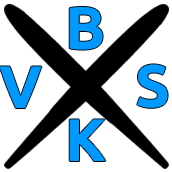
<style>
.page{position:relative;width:172px;height:172px;background:#ffffff}
.page>*{position:absolute;margin:0}
.t1{font:60px "Ubuntu-Bold";color:#0099ff;font-variant:small-caps}
</style>
<div class="page">
<p class="t1" style="left:69px;top:7px;width:34px;height:43px">B</p>
<p class="t1" style="left:137px;top:64px;width:31px;height:44px">S</p>
<p class="t1" style="left:0px;top:66px;width:42px;height:42px">V</p>
<p class="t1" style="left:69px;top:119px;width:37px;height:42px">K</p>
</div>
